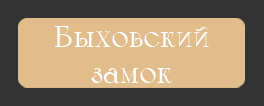
<style>
.page{position:relative;width:264px;height:106px;background:#e0bd8b}
.page>*{position:absolute;margin:0}
.t1{font:30px "Calypso-Regular";color:#ffffff}
</style>
<div class="page">
<p class="t1" style="left:55px;top:26px;width:154px;height:57px;text-align:center">Быховский<br>замок</p>
</div>
